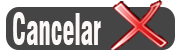
<style>
.page{position:relative;width:180px;height:50px;background:#454545}
.page>*{position:absolute;margin:0}
.t1{font:42.9px "Swiss721BT-BlackCondensed";color:#fcf8f8;scale:0.55 1}
</style>
<div class="page">
<p class="t1" style="left:13px;top:12px;width:88px;height:33px">Cancelar</p>
</div>
